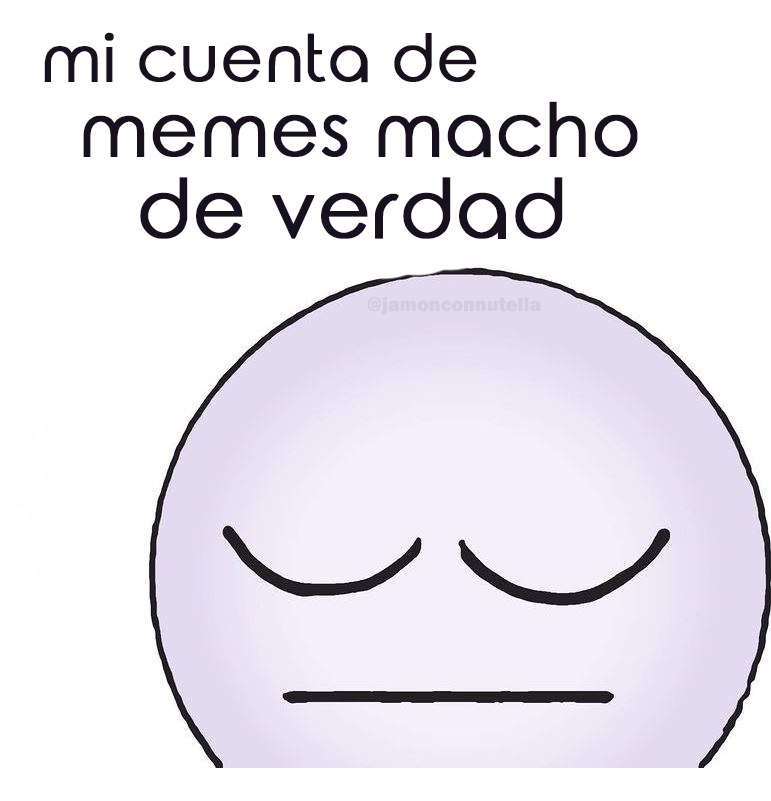
<style>
.page{position:relative;width:771px;height:801px;background:#ffffff}
.page>*{position:absolute;margin:0}
.t1{font:64px "RoundedElegance-Regular";color:#18101f;font-weight:bold}
.t2{font:73.3px "RoundedElegance-Regular";color:#18101f;font-weight:bold}
.t3{font:80px "RoundedElegance-Regular";color:#18101f;font-weight:bold}
.t4{font:20.1px "FranklinGothic-Heavy";color:#d3cbdf}
</style>
<div class="page">
<p class="t1" style="left:44px;top:32px;width:594px;height:207px">mi cuenta de<br>  <span class="t2">memes macho<br>     </span><span class="t3">de verdad</span></p>
<p class="t4" style="left:367px;top:297px;width:174px;height:18px">@jamonconnutella</p>
</div>
